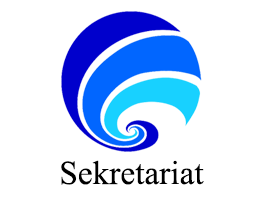
<style>
.page{position:relative;width:260px;height:200px;background:#ffffff}
.page>*{position:absolute;margin:0}
.t1{font:33.3px "TimesNewRomanPSMT";color:#000000}
</style>
<div class="page">
<p class="t1" style="left:61px;top:160px;width:143px;height:25px">Sekretariat</p>
</div>
